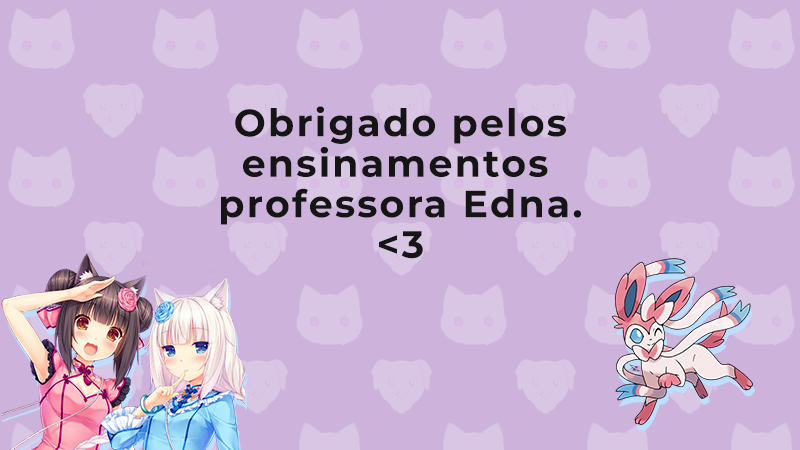
<style>
.page{position:relative;width:800px;height:450px;background:#cdb3db}
.page>*{position:absolute;margin:0}
.t1{font:37.9px/40.5px "Montserrat-Bold";letter-spacing:0.06em;color:#151515}
</style>
<div class="page">
<p class="t1" style="left:221px;top:106px;width:361px;height:153px;text-align:center">Obrigado pelos<br>ensinamentos <br>professora Edna.<br>&lt;3</p>
</div>
